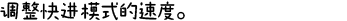
<style>
.page{position:relative;width:347px;height:21px;background:#ffffff}
.page>*{position:absolute;margin:0}
.t1{font:22px "¢è?";color:#000000}
</style>
<div class="page">
<p class="t1" style="left:0px;top:1px;width:185px;height:20px">调整快进模式的速度。</p>
</div>
